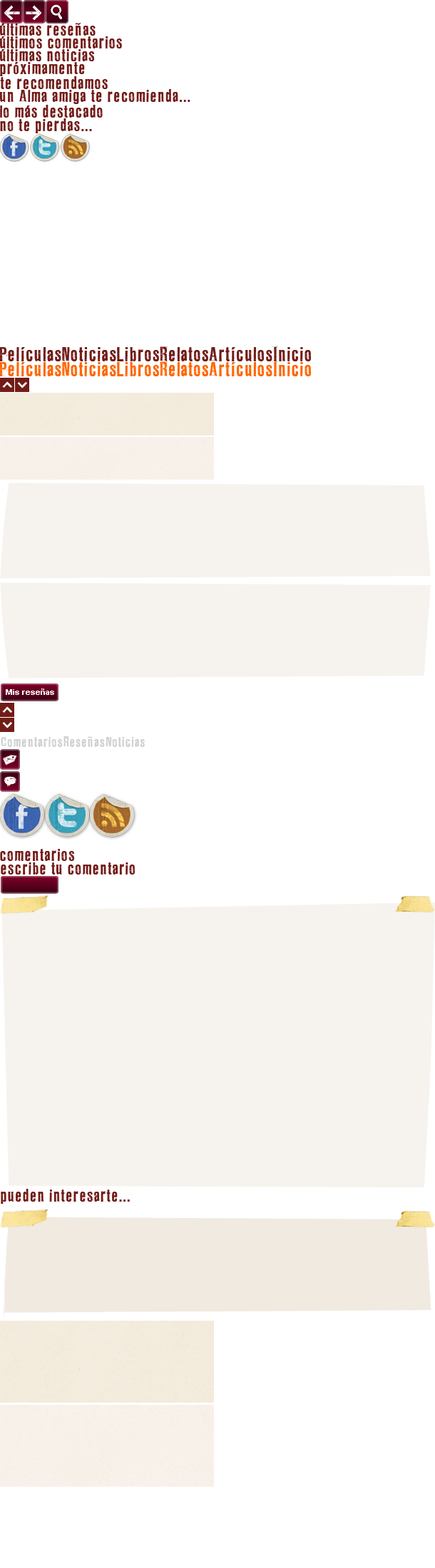
<style>
.page{position:relative;width:435px;height:1568px;background:#ffffff}
.page>*{position:absolute;margin:0}
.t1{font:15.7px "LLRubberGrotesqueOTF";color:#721c18}
.t2{font:17.8px "LLRubberGrotesqueOTF";color:#721c18}
.t3{font:17.8px "LLRubberGrotesqueOTF";color:#ff6600}
.t4{font:7.8px "Arial-BoldMT";color:#ffffff}
.t5{font:12.8px "LLRubberGrotesqueOTF";color:#d0d0d0}
</style>
<div class="page">
<p class="t1" style="left:0px;top:36px;width:122px;height:12px">últimos comentarios</p>
<p class="t1" style="left:0px;top:49px;width:95px;height:12px">últimas noticias</p>
<p class="t1" style="left:0px;top:62px;width:85px;height:14px">próximamente</p>
<p class="t1" style="left:0px;top:76px;width:108px;height:13px">te recomendamos</p>
<p class="t1" style="left:0px;top:89px;width:190px;height:15px">un Alma amiga te recomienda...</p>
<p class="t1" style="left:0px;top:105px;width:103px;height:13px">lo más destacado</p>
<p class="t1" style="left:0px;top:118px;width:92px;height:15px">no te pierdas...</p>
<p class="t2" style="left:0px;top:347px;width:61px;height:14px">Películas</p>
<p class="t2" style="left:62px;top:347px;width:54px;height:14px">Noticias</p>
<p class="t2" style="left:117px;top:347px;width:42px;height:14px">Libros</p>
<p class="t2" style="left:160px;top:346px;width:48px;height:15px">Relatos</p>
<p class="t2" style="left:209px;top:347px;width:63px;height:14px">Artículos</p>
<p class="t2" style="left:272px;top:346px;width:39px;height:15px">Inicio</p>
<p class="t3" style="left:0px;top:362px;width:61px;height:14px">Películas</p>
<p class="t3" style="left:62px;top:362px;width:54px;height:14px">Noticias</p>
<p class="t3" style="left:117px;top:362px;width:42px;height:14px">Libros</p>
<p class="t3" style="left:160px;top:361px;width:48px;height:15px">Relatos</p>
<p class="t3" style="left:209px;top:362px;width:63px;height:14px">Artículos</p>
<p class="t3" style="left:272px;top:361px;width:39px;height:15px">Inicio</p>
<p class="t4" style="left:6px;top:688px;width:48px;height:7px">Mis reseñas</p>
<p class="t5" style="left:1px;top:736px;width:62px;height:11px">Comentarios</p>
<p class="t5" style="left:63px;top:736px;width:42px;height:11px">Reseñas</p>
<p class="t5" style="left:105px;top:737px;width:40px;height:10px">Noticias</p>
<p class="t1" style="left:0px;top:849px;width:75px;height:12px">comentarios</p>
<p class="t1" style="left:1px;top:862px;width:134px;height:13px">escribe tu comentario</p>
<p class="t1" style="left:1px;top:1189px;width:129px;height:15px">pueden interesarte...</p>
</div>
